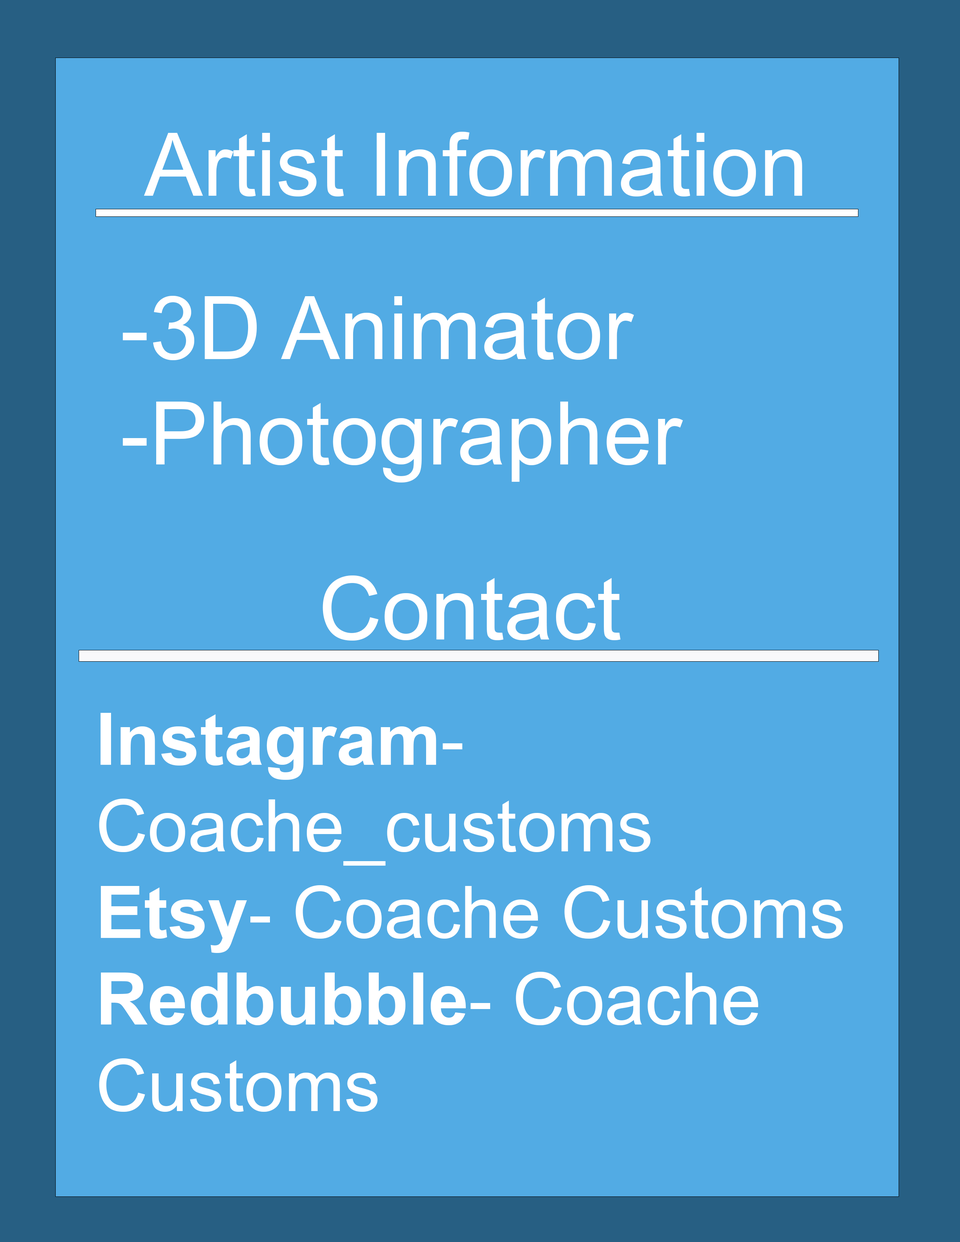
<style>
.page{position:relative;width:960px;height:1242px;background:#52abe4}
.page>*{position:absolute;margin:0}
.t1{font:87.8px "ArialMT";color:#ffffff}
.t2{font:72.2px "ArialMT";color:#ffffff}
.t3{font:72.2px "Arial-BoldMT";color:#ffffff}
</style>
<div class="page">
<p class="t1" style="left:144px;top:132px;width:658px;height:64px">Artist Information</p>
<p class="t1" style="left:123px;top:296px;width:560px;height:187px">-3D Animator<br>-Photographer</p>
<p class="t1" style="left:323px;top:576px;width:298px;height:65px">Contact</p>
<p class="t2" style="left:99px;top:713px;width:744px;height:399px"><span class="t3">Instagram</span>- Coache_customs<br><span class="t3">Etsy</span>- Coache Customs<br><span class="t3">Redbubble</span>- Coache Customs</p>
</div>
